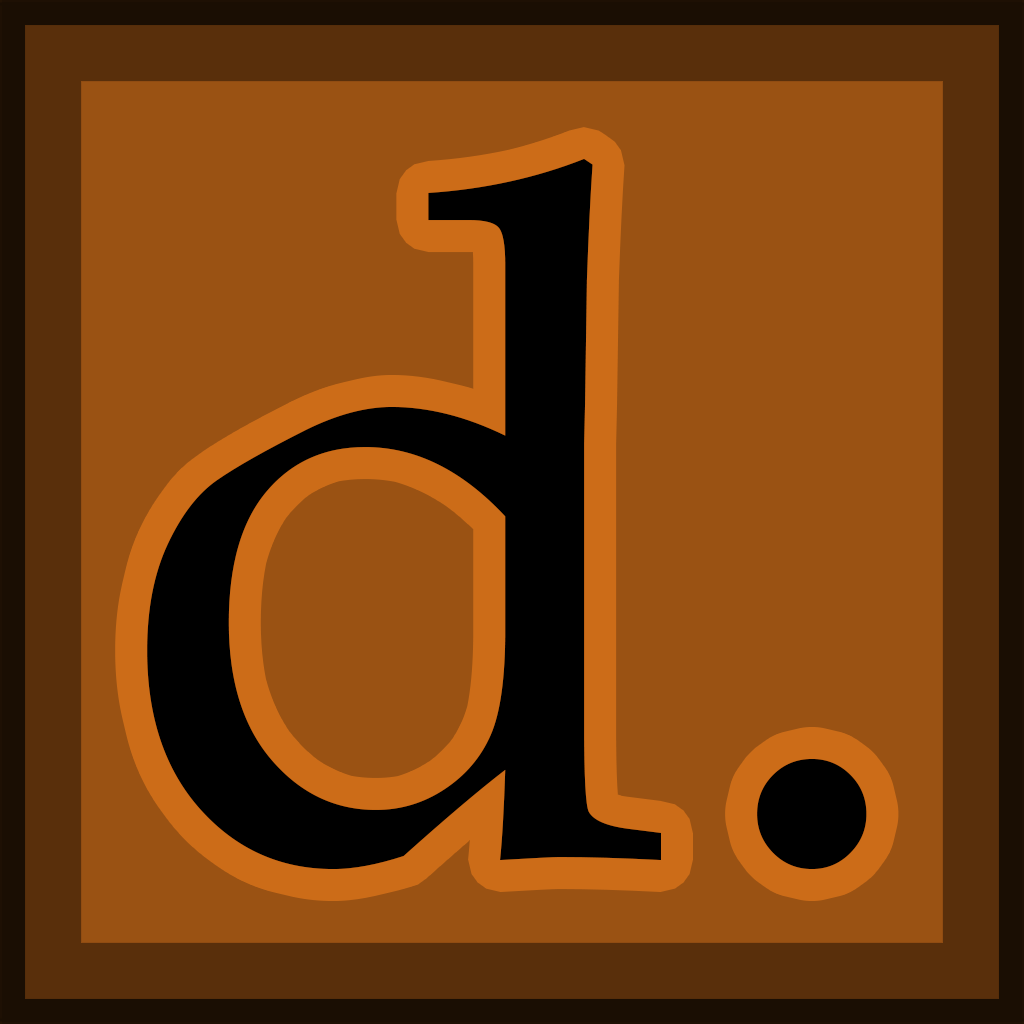
<style>
.page{position:relative;width:1024px;height:1024px;background:#9a5213}
.page>*{position:absolute;margin:0}
.t1{font:960px "BookAntiqua";color:#000000}
</style>
<div class="page">
<p class="t1" style="left:147px;top:159px;width:720px;height:710px">d.</p>
</div>
